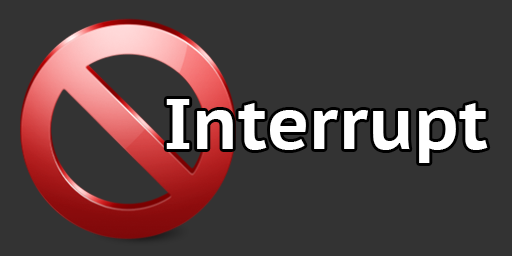
<style>
.page{position:relative;width:512px;height:256px;background:#333333}
.page>*{position:absolute;margin:0}
.t1{font:72px "PTSans-CaptionBold";color:#ffffff}
</style>
<div class="page">
<p class="t1" style="left:166px;top:99px;width:322px;height:64px">Interrupt</p>
</div>
